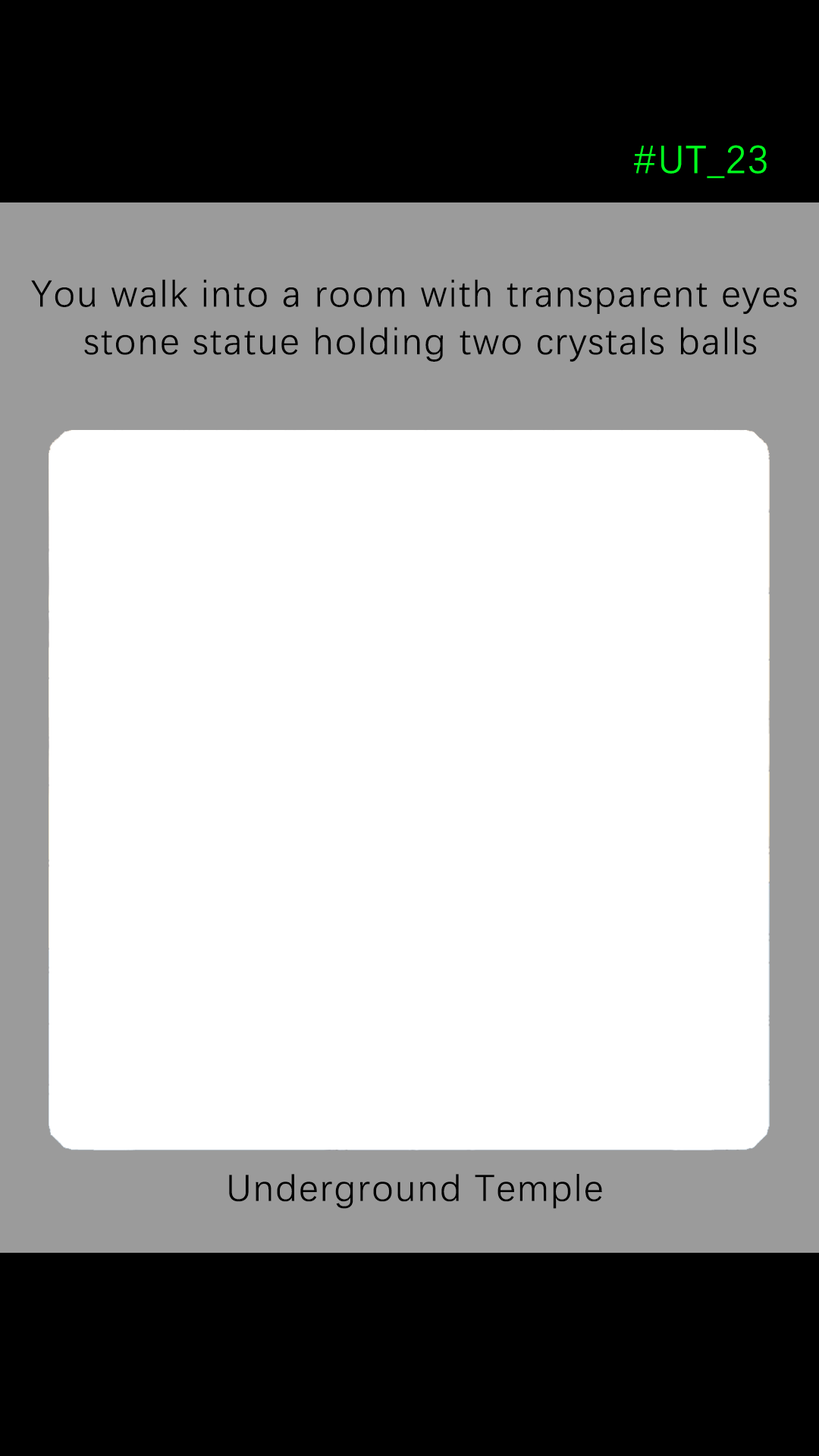
<style>
.page{position:relative;width:819px;height:1456px;background:#ffffff}
.page>*{position:absolute;margin:0}
.t1{font:39.2px "DengXian-Regular";letter-spacing:0.04em;color:#00ff1e}
.t2{font:37.9px/47.6px "DengXian-Regular";letter-spacing:0.04em;color:#000000}
.t3{font:37.9px "DengXian-Regular";letter-spacing:0.04em;color:#000000}
</style>
<div class="page">
<p class="t1" style="left:634px;top:145px;width:133px;height:33px">#UT_23</p>
<p class="t2" style="left:31px;top:279px;width:766px;height:83px;text-align:center">You walk into a room with transparent eyes<br> stone statue holding two crystals balls</p>
<p class="t3" style="left:229px;top:1174px;width:373px;height:35px">Underground Temple</p>
</div>
